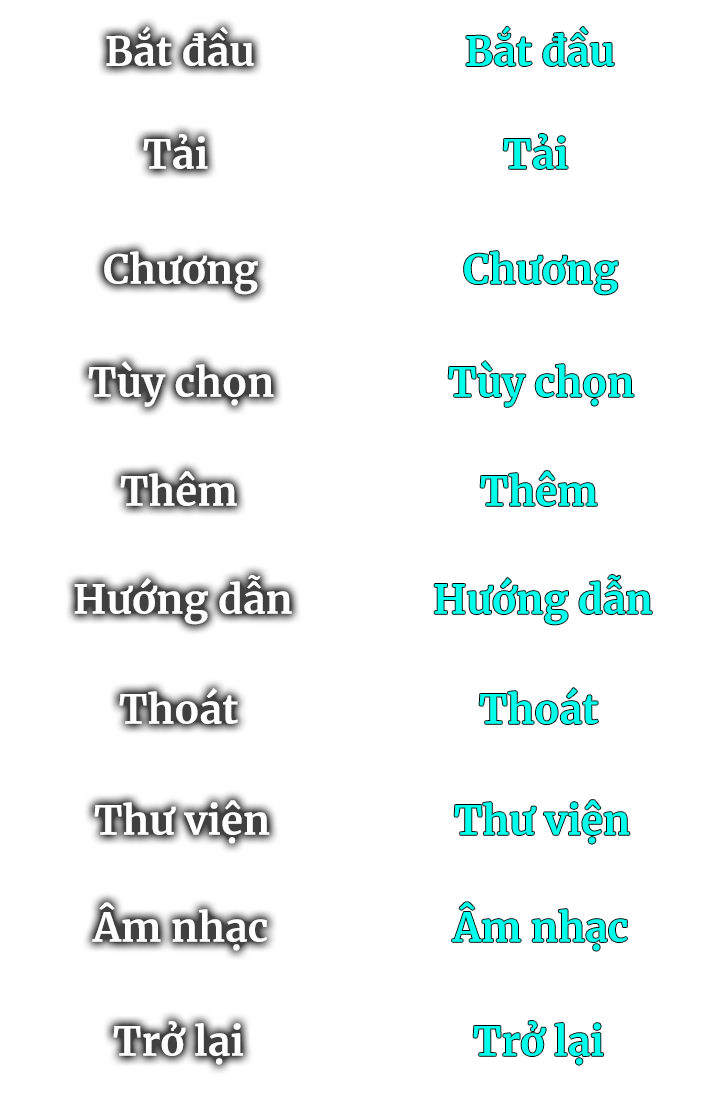
<style>
.page{position:relative;width:720px;height:1100px;background:#ffffff}
.page>*{position:absolute;margin:0}
.t1{font:40px "Merriweather-Bold";color:#ffffff}
.t2{font:40px "Merriweather-Bold";color:#00ffea}
.t3{font:40px "Merriweather-Bold";color:#00fee9}
</style>
<div class="page">
<p class="t1" style="left:106px;top:26px;width:148px;height:40px">Bắt đầu</p>
<p class="t2" style="left:466px;top:26px;width:148px;height:40px">Bắt đầu</p>
<p class="t1" style="left:143px;top:134px;width:65px;height:35px">Tải</p>
<p class="t3" style="left:503px;top:134px;width:65px;height:35px">Tải</p>
<p class="t1" style="left:104px;top:251px;width:154px;height:44px">Chương</p>
<p class="t2" style="left:464px;top:251px;width:154px;height:44px">Chương</p>
<p class="t1" style="left:88px;top:361px;width:186px;height:46px">Tùy chọn</p>
<p class="t2" style="left:448px;top:361px;width:186px;height:46px">Tùy chọn</p>
<p class="t1" style="left:120px;top:471px;width:117px;height:35px">Thêm</p>
<p class="t2" style="left:480px;top:471px;width:117px;height:35px">Thêm</p>
<p class="t1" style="left:74px;top:575px;width:218px;height:50px">Hướng dẫn</p>
<p class="t2" style="left:434px;top:575px;width:218px;height:50px">Hướng dẫn</p>
<p class="t1" style="left:119px;top:688px;width:119px;height:36px">Thoát</p>
<p class="t2" style="left:479px;top:688px;width:119px;height:36px">Thoát</p>
<p class="t1" style="left:94px;top:800px;width:176px;height:44px">Thư viện</p>
<p class="t2" style="left:454px;top:800px;width:176px;height:44px">Thư viện</p>
<p class="t1" style="left:92px;top:902px;width:175px;height:49px">Âm nhạc</p>
<p class="t2" style="left:452px;top:902px;width:175px;height:49px">Âm nhạc</p>
<p class="t1" style="left:113px;top:1021px;width:130px;height:44px">Trở lại</p>
<p class="t2" style="left:473px;top:1021px;width:130px;height:44px">Trở lại</p>
</div>
